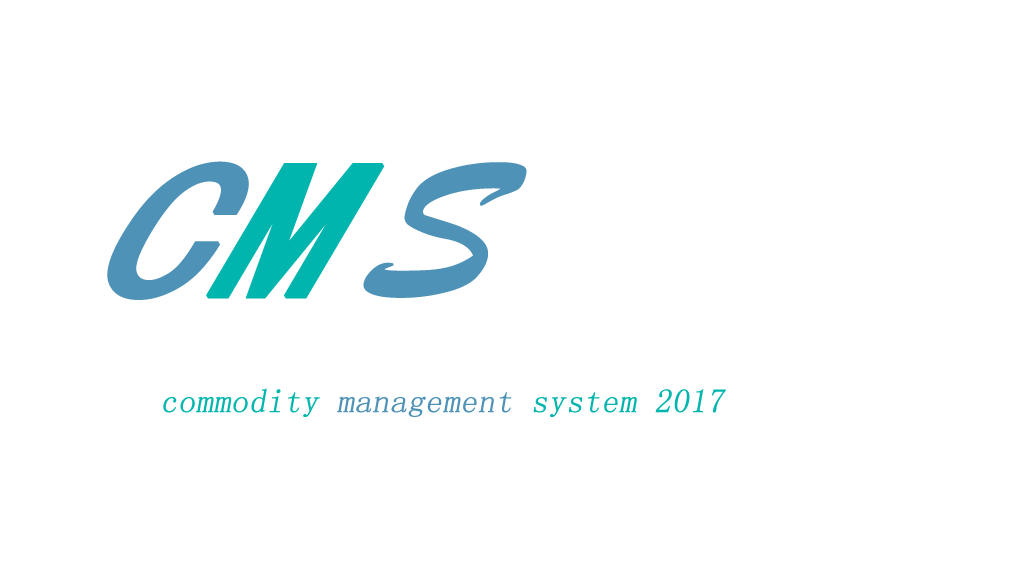
<style>
.page{position:relative;width:1024px;height:580px;background:#ffffff}
.page>*{position:absolute;margin:0}
.t1{font:208.3px "SimHei";color:#4e93b7;font-weight:bold;font-style:italic;scale:1.09 1}
.t2{font:208.3px "SimHei";color:#00b5ad;font-weight:bold;font-style:italic;scale:1.09 1}
.t3{font:208.3px "STXingkai";color:#4e93b7;font-weight:bold;font-style:italic}
.t4{font:33.3px "SimSun";color:#00b5ad;font-weight:bold;font-style:italic}
.t5{font:33.3px "SimSun";color:#4e93b7;font-weight:bold;font-style:italic}
</style>
<div class="page">
<p class="t1" style="left:107px;top:161px;width:278px;height:139px">C<span class="t2">M</span></p>
<p class="t3" style="left:363px;top:162px;width:164px;height:136px">S</p>
<p class="t4" style="left:163px;top:388px;width:563px;height:29px">commodity <span class="t5">management </span>system 2017</p>
</div>
